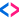
<style>
.page{position:relative;width:19px;height:19px;background:#ffffff}
.page>*{position:absolute;margin:0}
.t1{font:28.6px "HelveticaNeue-Bold";color:#006add;scale:0.59 1}
.t2{font:28.6px "HelveticaNeue-Bold";color:#ff1981;scale:0.59 1}
</style>
<div class="page">
<p class="t1" style="left:0px;top:2px;width:9px;height:16px">&lt;</p>
<p class="t2" style="left:10px;top:2px;width:10px;height:16px">&gt;</p>
</div>
